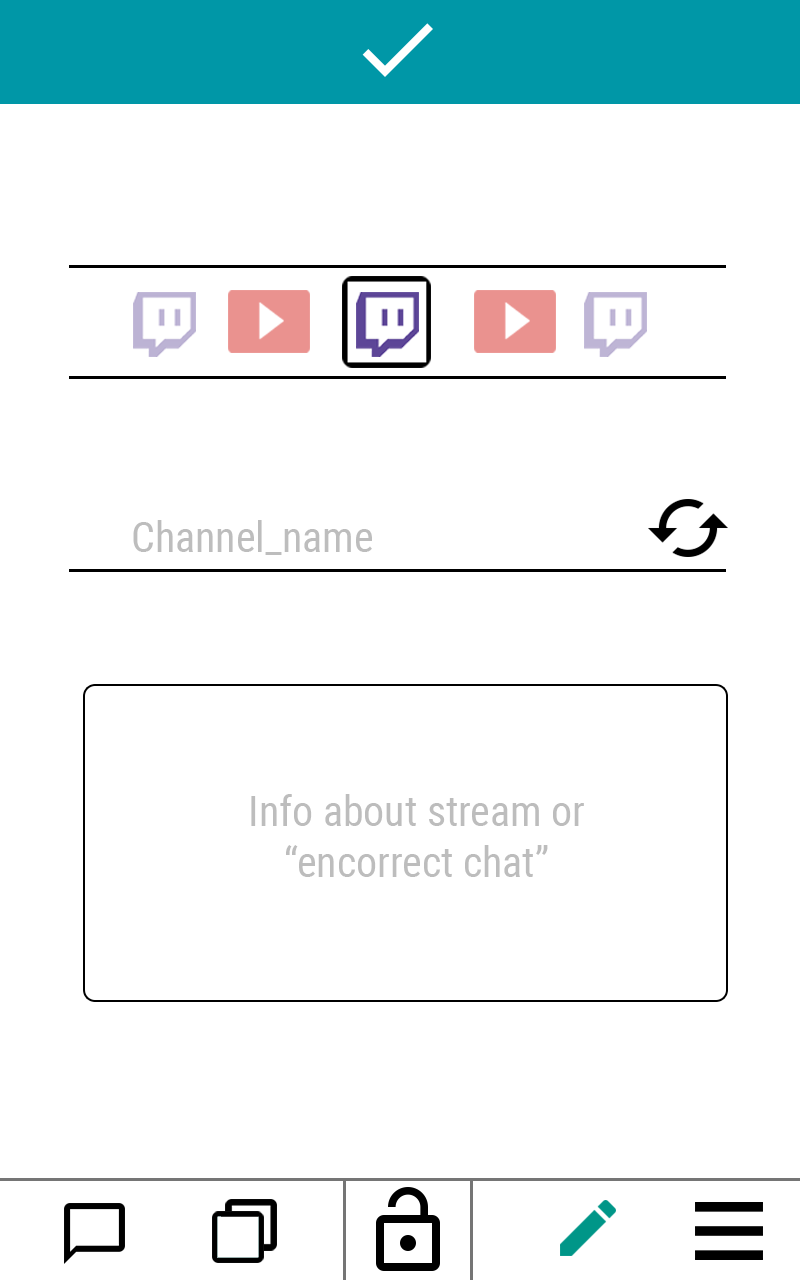
<style>
.page{position:relative;width:800px;height:1280px;background:#ffffff}
.page>*{position:absolute;margin:0}
.t1{font:41.8px "RobotoCondensed-Regular";color:#bdbdbd}
</style>
<div class="page">
<p class="t1" style="left:133px;top:520px;width:239px;height:35px">Channel_name</p>
<p class="t1" style="left:251px;top:794px;width:333px;height:83px;text-align:center">Info about stream or <br>“encorrect chat”</p>
</div>
